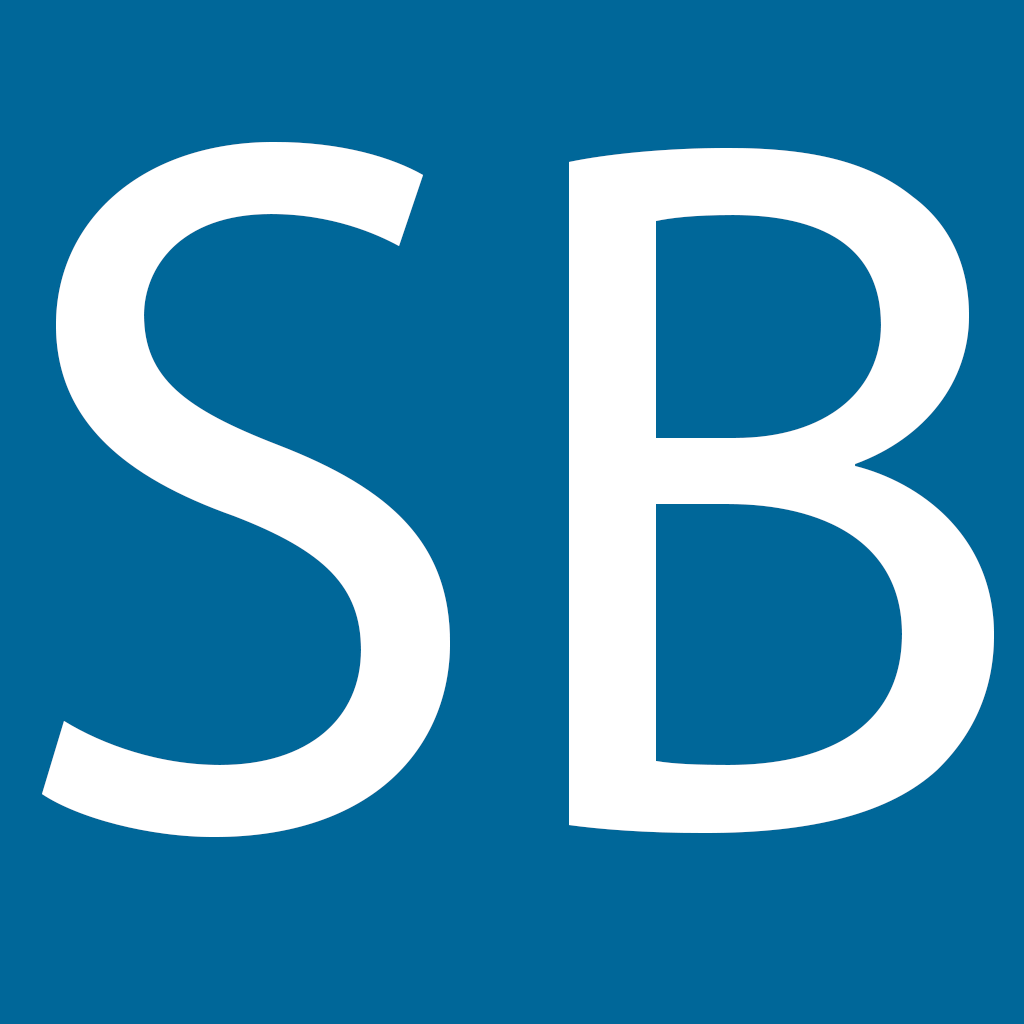
<style>
.page{position:relative;width:1024px;height:1024px;background:#006799}
.page>*{position:absolute;margin:0}
.t1{font:1000px "MyriadPro-Regular";color:#ffffff}
</style>
<div class="page">
<p class="t1" style="left:42px;top:142px;width:952px;height:695px">SB</p>
</div>
